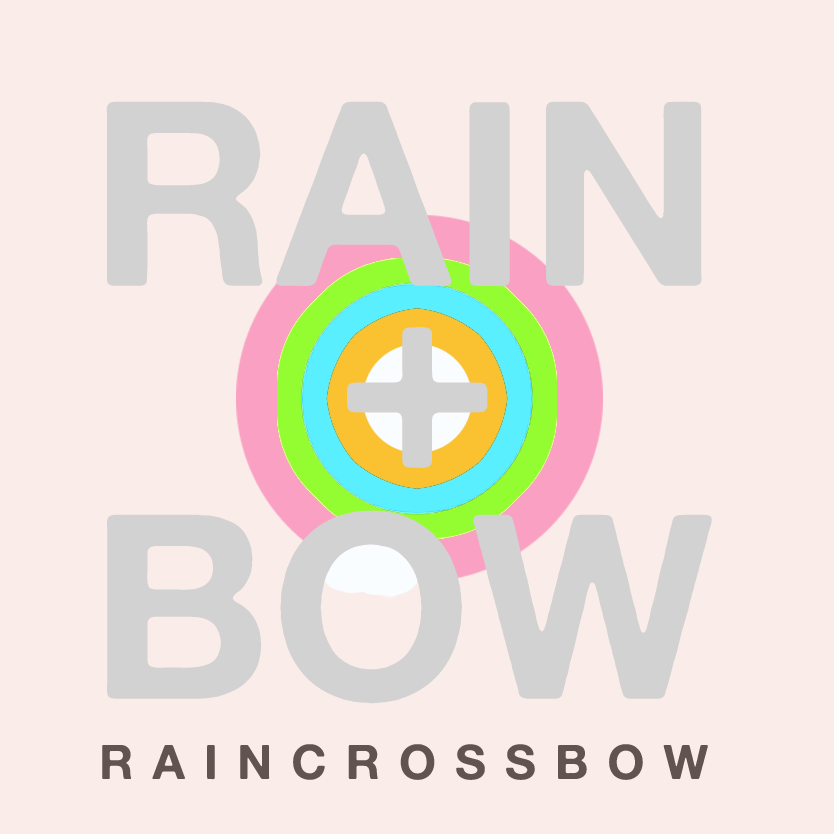
<style>
.page{position:relative;width:834px;height:834px;background:#faede9}
.page>*{position:absolute;margin:0}
.t1{font:257.9px "AlteHaasGrotesk_Bold";color:#cccccc}
.t2{font:278.3px "AlteHaasGrotesk_Bold";color:#cccccc}
.t3{font:47.6px "AlteHaasGrotesk_Bold";letter-spacing:0.4em;color:#615450}
</style>
<div class="page">
<p class="t1" style="left:106px;top:101px;width:596px;height:186px">RAIN</p>
<p class="t2" style="left:347px;top:327px;width:141px;height:141px">+</p>
<p class="t1" style="left:107px;top:510px;width:605px;height:194px">BOW</p>
<p class="t3" style="left:102px;top:744px;width:606px;height:36px">RAINCROSSBOW</p>
</div>
